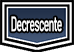
<style>
.page{position:relative;width:74px;height:52px}
.page>*{position:absolute;margin:0}
.t1{font:21.3px "Barlow-SemiBold";letter-spacing:-0.05em;color:#ffffff;scale:0.47 1}
</style>
<div class="page">
<p class="t1" style="left:11px;top:16px;width:51px;height:16px">Decrescente</p>
</div>
